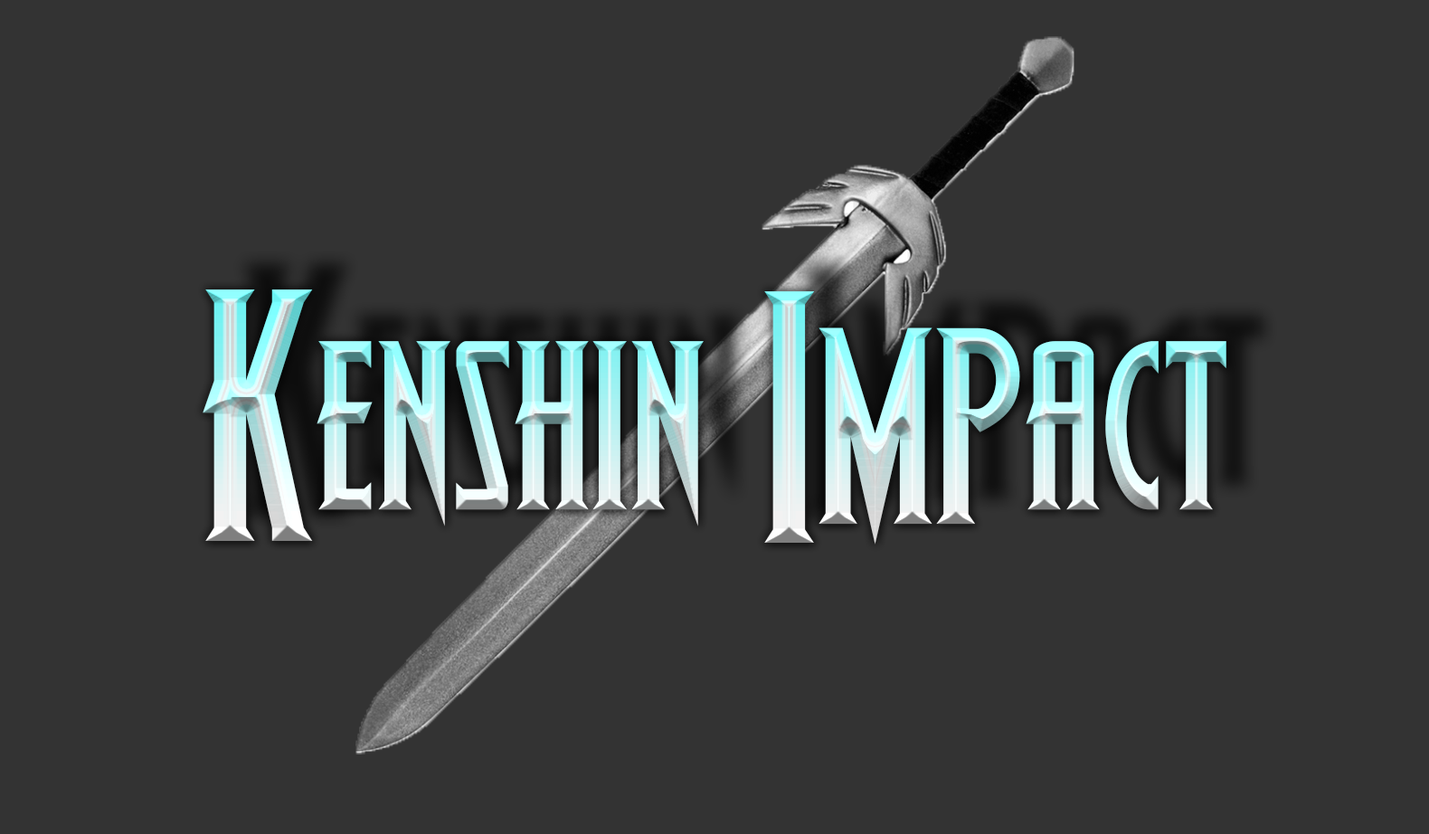
<style>
.page{position:relative;width:1429px;height:834px;background:#333333}
.page>*{position:absolute;margin:0}
.t1{font:263.9px "Wolf'sBane"}
.t2{font:339.3px "Wolf'sBane"}
</style>
<div class="page">
<p class="t1" style="left:203px;top:290px;width:1024px;height:255px"><span class="t2">K</span>enshin <span class="t2">I</span>MPact</p>
</div>
